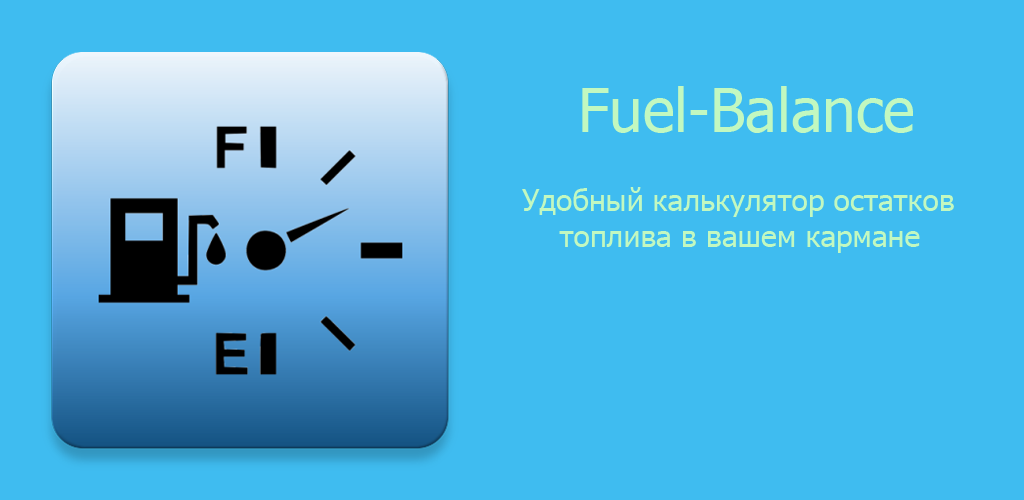
<style>
.page{position:relative;width:1024px;height:500px;background:#3fbcf0}
.page>*{position:absolute;margin:0}
.t1{font:60px "Tahoma";color:#c2f8c0}
.t2{font:30px "Tahoma";color:#c2f8c0}
</style>
<div class="page">
<p class="t1" style="left:582px;top:86px;width:331px;height:47px">Fuel-Balance</p>
<p class="t2" style="left:522px;top:187px;width:432px;height:66px">Удобный калькулятор остатков<br>    топлива в вашем кармане</p>
</div>
